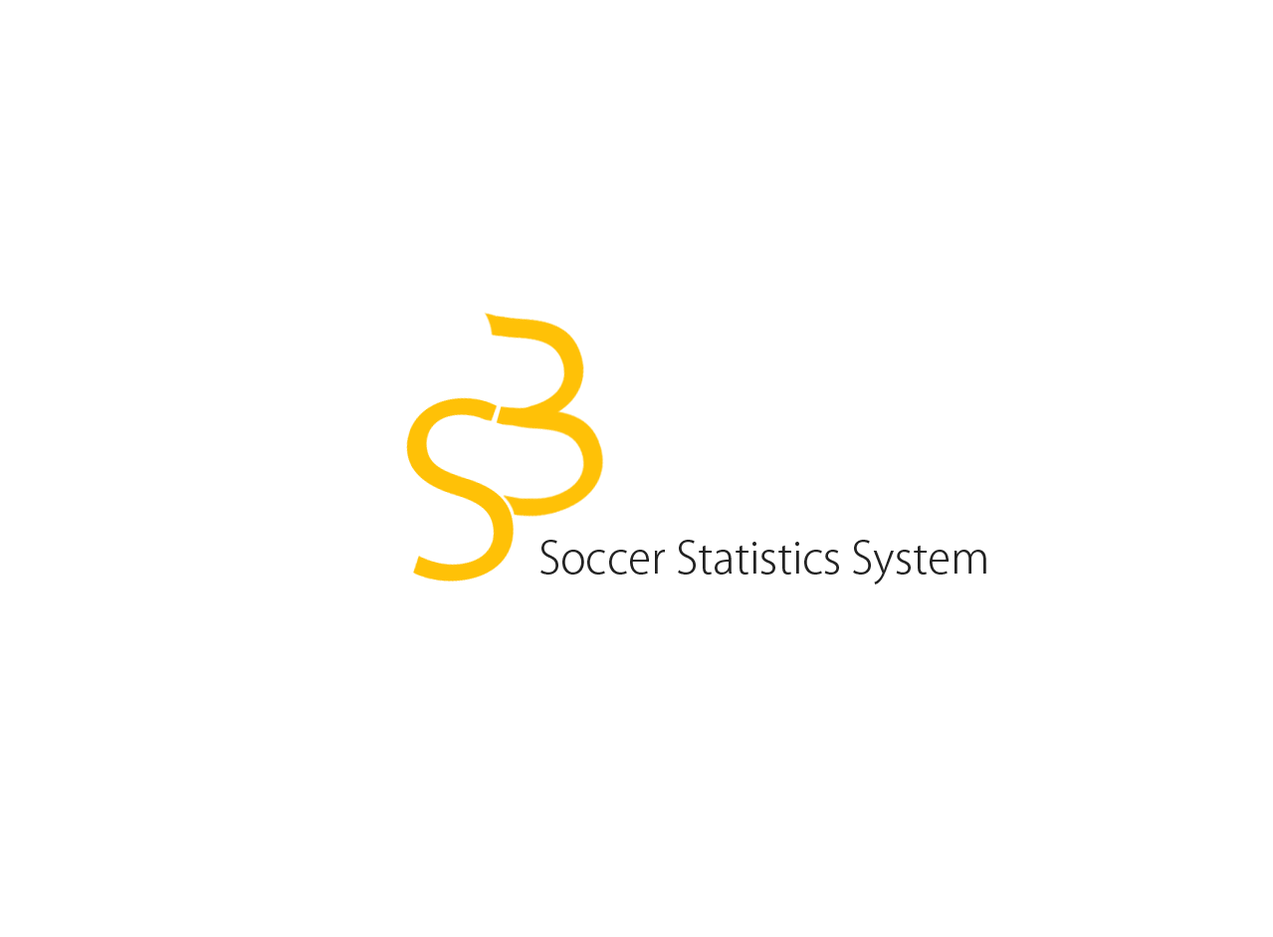
<style>
.page{position:relative;width:1273px;height:937px;background:#ffffff}
.page>*{position:absolute;margin:0}
.t1{font:42.8px "KozGoPr6N-Light";color:#222222}
</style>
<div class="page">
<p class="t1" style="left:540px;top:539px;width:446px;height:45px">Soccer Statistics System</p>
</div>
